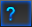
<style>
.page{position:relative;width:32px;height:27px}
.page>*{position:absolute;margin:0}
.t1{font:17px "ArialMT"}
</style>
<div class="page">
<p class="t1" style="left:6px;top:7px;width:9px;height:13px">?</p>
</div>
